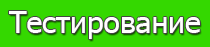
<style>
.page{position:relative;width:210px;height:47px;background:#34d800}
.page>*{position:absolute;margin:0}
.t1{font:30px "Tahoma";color:#ffffff}
</style>
<div class="page">
<p class="t1" style="left:9px;top:11px;width:191px;height:28px">Тестирование</p>
</div>
